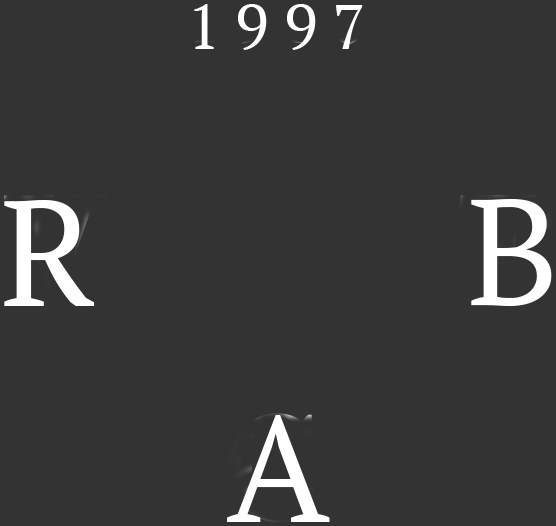
<style>
.page{position:relative;width:556px;height:526px;background:#333333}
.page>*{position:absolute;margin:0}
.t1{font:62.5px "PTSerif-Regular";color:#ffffff}
.t2{font:150px "PTSerif-Regular";color:#ffffff}
</style>
<div class="page">
<p class="t1" style="left:194px;top:4px;width:169px;height:46px">1 9 9 7</p>
<p class="t2" style="left:4px;top:200px;width:91px;height:106px">R</p>
<p class="t2" style="left:471px;top:199px;width:81px;height:107px">B</p>
<p class="t2" style="left:227px;top:415px;width:103px;height:107px">A</p>
</div>
